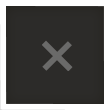
<style>
.page{position:relative;width:110px;height:110px;background:#2c2b29}
.page>*{position:absolute;margin:0}
.t1{font:69.7px "KoPubDotumMedium";color:#6a6a69;font-weight:bold}
</style>
<div class="page">
<p class="t1" style="left:42px;top:40px;width:31px;height:31px;rotate:-45deg">+</p>
</div>
